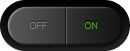
<style>
.page{position:relative;width:130px;height:51px}
.page>*{position:absolute;margin:0}
.t1{font:8.8px "NexaLight";color:#818181}
.t2{font:8.8px "NexaLight";color:#49ae0c}
</style>
<div class="page">
<p class="t1" style="left:29px;top:22px;width:18px;height:7px">OFF</p>
<p class="t2" style="left:84px;top:22px;width:14px;height:7px">ON</p>
</div>
